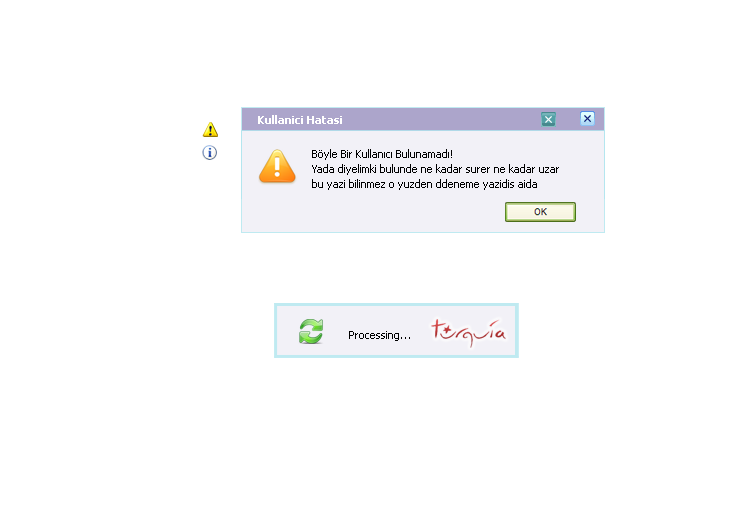
<style>
.page{position:relative;width:729px;height:510px;background:#ffffff}
.page>*{position:absolute;margin:0}
.t1{font:11px "Tahoma-Bold";color:#ffffff}
.t2{font:11px/15px "Tahoma";color:#000000}
.t3{font:11px "Tahoma";color:#000000}
</style>
<div class="page">
<p class="t1" style="left:258px;top:115px;width:84px;height:9px">Kullanici Hatasi</p>
<p class="t2" style="left:312px;top:149px;width:247px;height:41px">Böyle Bir Kullanıcı Bulunamadı!<br>Yada diyelimki bulunde ne kadar surer ne kadar uzar<br>bu yazi bilinmez o yuzden ddeneme yazidis aida</p>
<p class="t3" style="left:349px;top:331px;width:61px;height:10px">Processing...</p>
</div>
